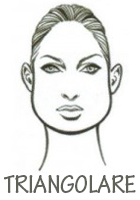
<style>
.page{position:relative;width:140px;height:200px;background:#ffffff}
.page>*{position:absolute;margin:0}
.t1{font:27px "TektonPro-BoldCond";color:#606159}
</style>
<div class="page">
<p class="t1" style="left:4px;top:175px;width:132px;height:18px">TRIANGOLARE</p>
</div>
